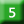
<style>
.page{position:relative;width:24px;height:24px;background:#29a626}
.page>*{position:absolute;margin:0}
.t1{font:14px "Shruti";color:#ffffff;font-weight:bold}
</style>
<div class="page">
<p class="t1" style="left:9px;top:7px;width:7px;height:11px">5</p>
</div>
